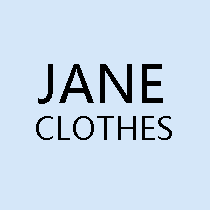
<style>
.page{position:relative;width:210px;height:210px;background:#d5e7f9}
.page>*{position:absolute;margin:0}
.t1{font:52.2px "MicrosoftYaHei";color:#000000}
.t2{font:31.3px "MicrosoftYaHei";color:#000000}
</style>
<div class="page">
<p class="t1" style="left:38px;top:64px;width:125px;height:40px">JANE</p>
<p class="t2" style="left:36px;top:116px;width:136px;height:24px">CLOTHES</p>
</div>
